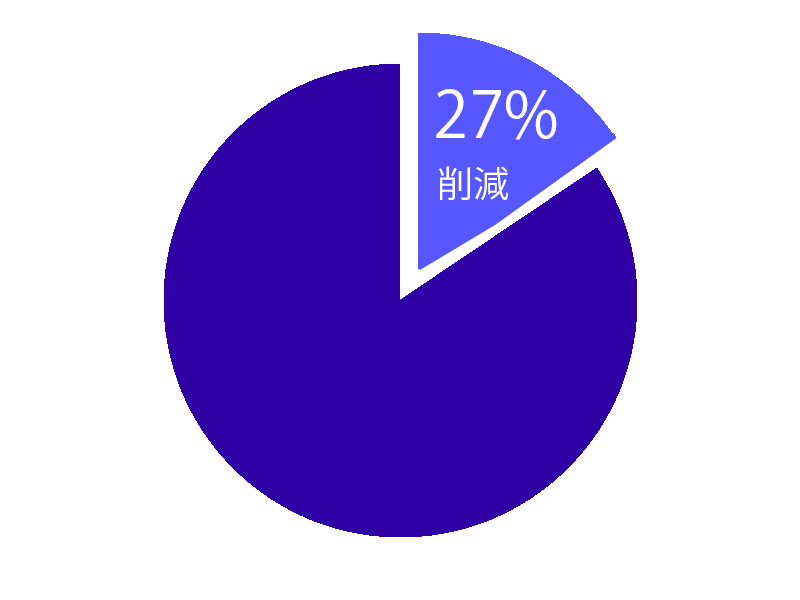
<style>
.page{position:relative;width:800px;height:600px;background:#ffffff}
.page>*{position:absolute;margin:0}
.t1{font:64px "KozGoPr6N-Regular";color:#ffffff}
.t2{font:36px "KozGoPr6N-Regular";color:#ffffff}
</style>
<div class="page">
<p class="t1" style="left:436px;top:89px;width:121px;height:51px">27%</p>
<p class="t2" style="left:439px;top:166px;width:69px;height:35px">削減</p>
</div>
